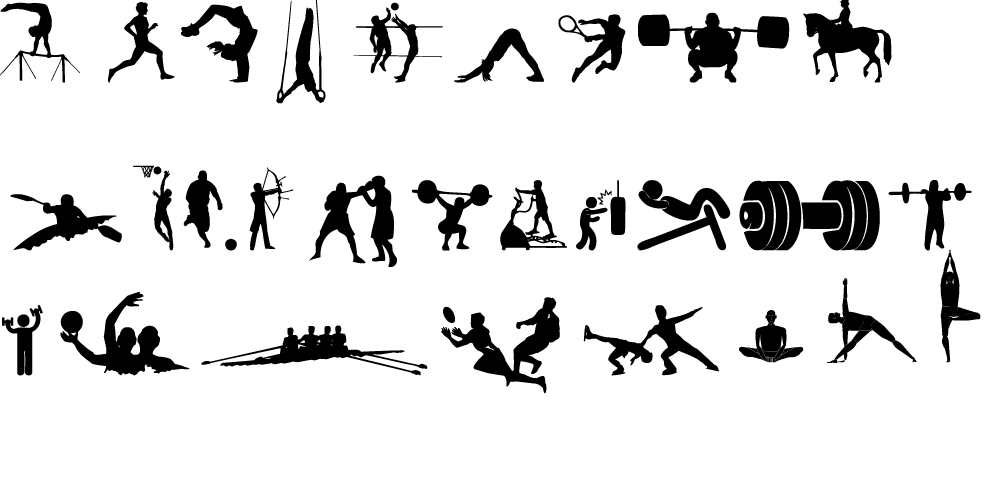
<style>
.page{position:relative;width:1000px;height:500px;background:#ffffff}
.page>*{position:absolute;margin:0}
.t1{font:100px/125px "Sportstfb";letter-spacing:0.05em;color:#000000}
.t2{font:100px/125px "FIGHTCLUB";letter-spacing:0.05em;color:#000000}
.t3{font:100px/125px "GYM";letter-spacing:0.05em;color:#000000}
.t4{font:125px/125px "Yogafont";letter-spacing:0.05em;color:#000000}
</style>
<div class="page">
<p class="t1" style="left:0px;top:0px;width:981px;height:394px">atCW{Q$%&amp;*+_;<span class="t2">Z</span><span class="t3">GJLNVX@</span>`:@z<span class="t4">wfd</span></p>
</div>
